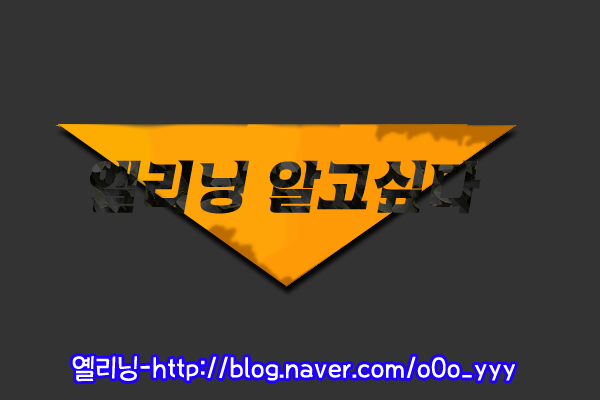
<style>
.page{position:relative;width:600px;height:400px;background:#333333}
.page>*{position:absolute;margin:0}
.t1{font:59px "SandEgB";font-style:italic}
.t2{font:28px "THEMiss";color:#ffffff}
</style>
<div class="page">
<p class="t1" style="left:90px;top:160px;width:391px;height:54px">옐리닝 알고싶다</p>
<p class="t2" style="left:72px;top:356px;width:443px;height:26px">옐리닝-http://blog.naver.com/o0o_yyy</p>
</div>
